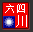
<style>
.page{position:relative;width:33px;height:32px;background:#f20000}
.page>*{position:absolute;margin:0}
.t1{font:10.4px "SimSun";color:#ffffff}
.t2{font:11.7px "SimSun";color:#ffffff}
</style>
<div class="page">
<p class="t1" style="left:5px;top:4px;width:20px;height:9px">六四</p>
<p class="t2" style="left:16px;top:15px;width:11px;height:12px">川</p>
</div>
